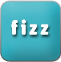
<style>
.page{position:relative;width:61px;height:62px}
.page>*{position:absolute;margin:0}
.t1{font:20px "UnitRoundedOT-Ultra";letter-spacing:0.14em;color:#fefefe}
</style>
<div class="page">
<p class="t1" style="left:11px;top:19px;width:38px;height:16px">fizz</p>
</div>
